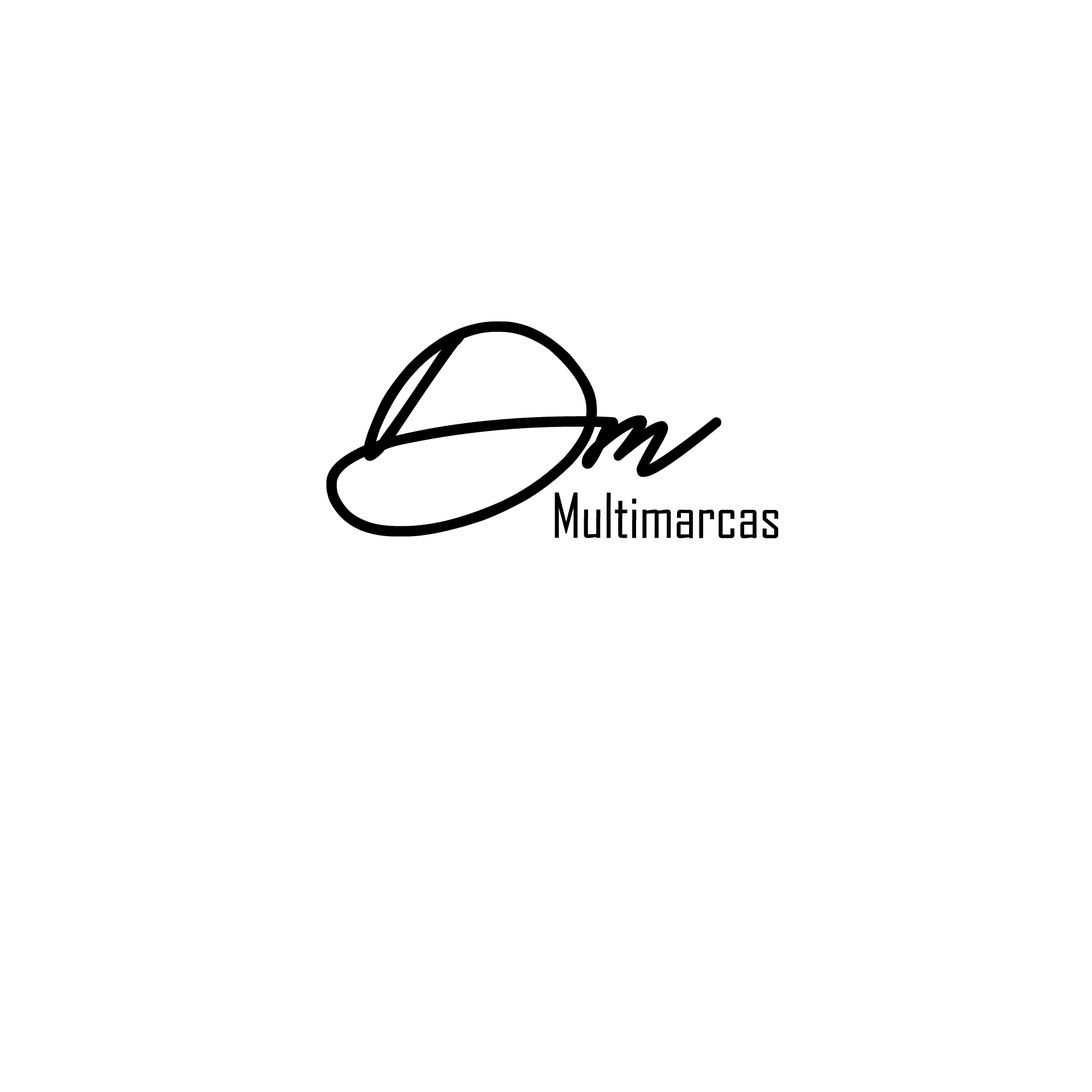
<style>
.page{position:relative;width:1092px;height:1092px;background:#ffffff}
.page>*{position:absolute;margin:0}
.t1{font:227.5px "Astina";color:#000000}
.t2{font:455px "Astina";color:#000000}
.t3{font:59.1px "AgencyFB-Reg";color:#000000}
.t4{font:227.5px "AgencyFB-Reg";color:#000000}
</style>
<div class="page">
<p class="t1" style="left:330px;top:325px;width:387px;height:208px"><span class="t2">\</span>Dm</p>
<p class="t3" style="left:555px;top:492px;width:224px;height:46px"><span class="t4"><br></span>Multimarcas</p>
</div>
